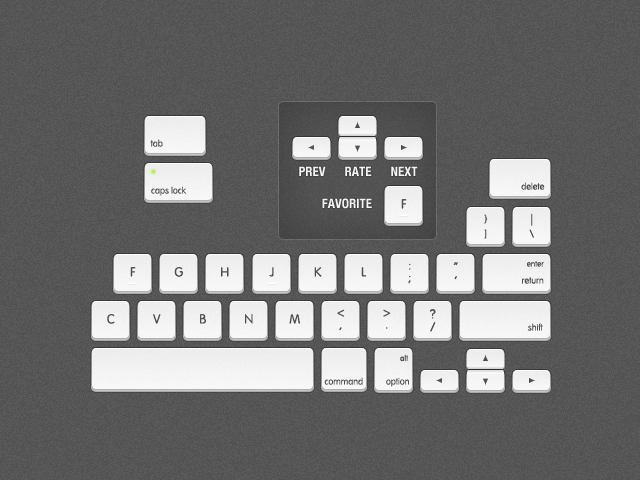
<style>
.page{position:relative;width:640px;height:480px;background:#525252}
.page>*{position:absolute;margin:0}
.t1{font:9px "VAGRoundedStd-Thin";color:#4b4b4b}
.t2{font:13px "HelveticaNeue-CondensedBold";color:#fefefe}
.t3{font:13px "VAGRoundedStd-Light";color:#4b4b4b}
.t4{font:11px/15px "VAGRoundedStd-Light"}
.t5{font:11px/15px "VAGRoundedStd-Light";color:#4b4b4b}
.t6{font:13px/12px "VAGRoundedStd-Light";color:#4b4b4b}
.t7{font:13px/14px "VAGRoundedStd-Light";color:#4b4b4b}
.t8{font:8px "VAGRoundedStd-Thin";color:#4b4b4b}
.t9{font:13px "CenturyGothic";color:#4b4b4b}
.t10{font:13px/13px "VAGRoundedStd-Light";color:#4b4b4b}
</style>
<div class="page">
<p class="t1" style="left:150px;top:139px;width:13px;height:8px">tab</p>
<p class="t2" style="left:299px;top:166px;width:27px;height:10px">PREV</p>
<p class="t2" style="left:345px;top:166px;width:27px;height:10px">RATE</p>
<p class="t2" style="left:391px;top:166px;width:27px;height:10px">NEXT</p>
<p class="t1" style="left:521px;top:182px;width:24px;height:8px">delete</p>
<p class="t1" style="left:151px;top:186px;width:35px;height:10px">caps lock</p>
<p class="t2" style="left:322px;top:198px;width:50px;height:11px">FAVORITE</p>
<p class="t3" style="left:401px;top:199px;width:6px;height:10px">F</p>
<p class="t4" style="left:484px;top:214px;width:4px;height:25px;text-align:center">}<br>]</p>
<p class="t5" style="left:529px;top:213px;width:5px;height:25px;text-align:center">|<br>\</p>
<p class="t3" style="left:130px;top:267px;width:6px;height:10px">F</p>
<p class="t3" style="left:174px;top:267px;width:9px;height:10px">G</p>
<p class="t3" style="left:221px;top:267px;width:8px;height:10px">H</p>
<p class="t3" style="left:269px;top:267px;width:5px;height:10px">J</p>
<p class="t3" style="left:314px;top:267px;width:8px;height:10px">K</p>
<p class="t3" style="left:361px;top:267px;width:6px;height:10px">L</p>
<p class="t6" style="left:408px;top:263px;width:3px;height:21px;text-align:center">:<br>;</p>
<p class="t7" style="left:453px;top:262px;width:5px;height:18px;text-align:center">“<br>‘</p>
<p class="t8" style="left:527px;top:260px;width:17px;height:7px">enter</p>
<p class="t1" style="left:522px;top:277px;width:22px;height:7px">return</p>
<p class="t3" style="left:107px;top:314px;width:8px;height:10px">C</p>
<p class="t3" style="left:153px;top:314px;width:8px;height:10px">V</p>
<p class="t3" style="left:200px;top:314px;width:6px;height:10px">B</p>
<p class="t9" style="left:245px;top:314px;width:8px;height:10px">N</p>
<p class="t3" style="left:289px;top:314px;width:11px;height:10px">M</p>
<p class="t6" style="left:337px;top:309px;width:8px;height:22px;text-align:center">&lt;<br>,</p>
<p class="t6" style="left:383px;top:309px;width:8px;height:20px;text-align:center">&gt;<br>.</p>
<p class="t10" style="left:430px;top:309px;width:6px;height:23px;text-align:center">?<br>/</p>
<p class="t1" style="left:527px;top:323px;width:16px;height:8px">shift</p>
<p class="t8" style="left:400px;top:354px;width:8px;height:8px">alt</p>
<p class="t1" style="left:324px;top:377px;width:39px;height:8px">command</p>
<p class="t1" style="left:386px;top:378px;width:23px;height:9px">option</p>
</div>
